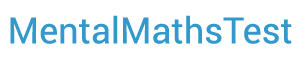
<style>
.page{position:relative;width:300px;height:60px;background:#ffffff}
.page>*{position:absolute;margin:0}
.t1{font:36px "Roboto-Regular";color:#3399cc}
</style>
<div class="page">
<p class="t1" style="left:10px;top:15px;width:282px;height:29px">MentalMathsTest</p>
</div>
